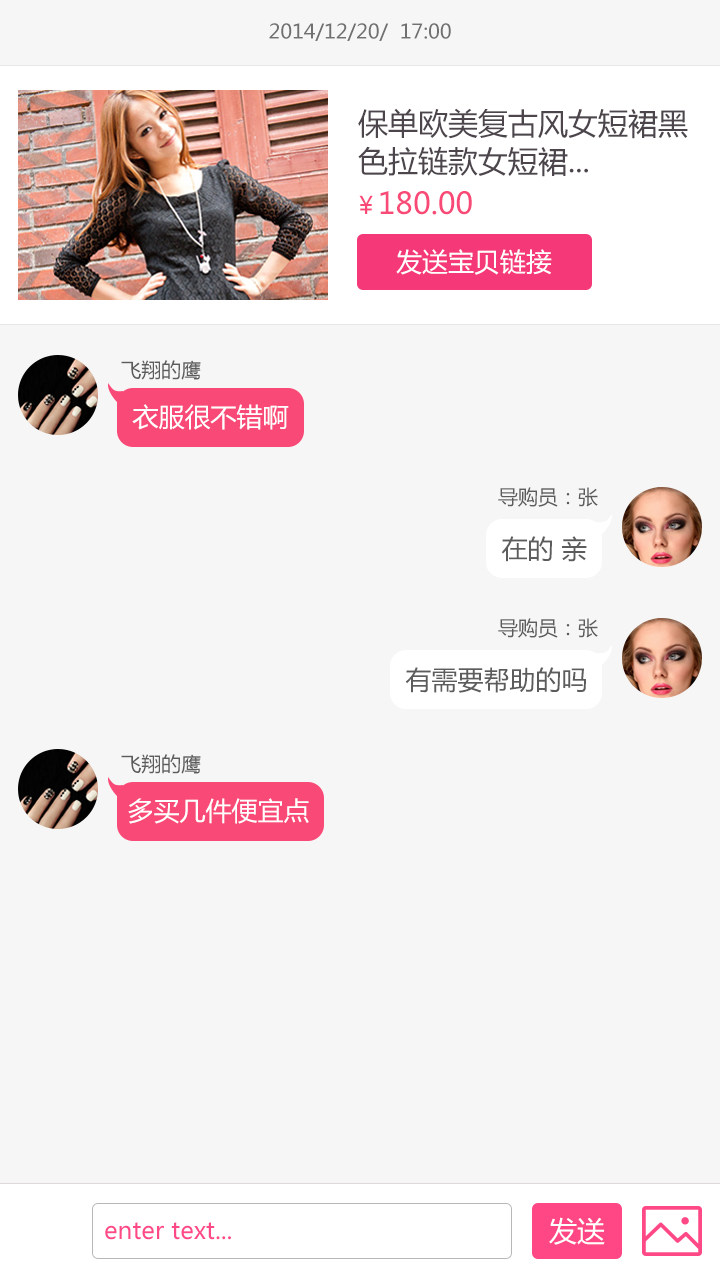
<style>
.page{position:relative;width:720px;height:1280px;background:#f7f6f6}
.page>*{position:absolute;margin:0}
.t1{font:20px "MicrosoftYaHei";color:#707070}
.t2{font:30px/38px "MicrosoftYaHei";color:#4c454c}
.t3{font:30px "MicrosoftYaHei";color:#f94977}
.t4{font:24px "MicrosoftYaHei";color:#f94977}
.t5{font:26px "MicrosoftYaHei";color:#ffffff}
.t6{font:20px "MicrosoftYaHei";color:#5c5c5c}
.t7{font:26px "MicrosoftYaHei";color:#5c5c5c}
.t8{font:28px "MicrosoftYaHei";color:#fffffe}
.t9{font:24px "MicrosoftYaHei";color:#ff4987}
</style>
<div class="page">
<p class="t1" style="left:269px;top:23px;width:182px;height:18px">2014/12/20/  17:00</p>
<p class="t2" style="left:358px;top:108px;width:330px;height:69px">保单欧美复古风女短裙黑<br>色拉链款女短裙...</p>
<p class="t3" style="left:359px;top:191px;width:113px;height:24px"><span class="t4">￥</span>180.00</p>
<p class="t5" style="left:396px;top:249px;width:156px;height:26px">发送宝贝链接</p>
<p class="t6" style="left:121px;top:360px;width:80px;height:20px">飞翔的鹰</p>
<p class="t5" style="left:132px;top:404px;width:157px;height:26px">衣服很不错啊</p>
<p class="t6" style="left:498px;top:487px;width:100px;height:20px">导购员：张</p>
<p class="t7" style="left:501px;top:536px;width:86px;height:26px">在的 亲</p>
<p class="t6" style="left:498px;top:618px;width:100px;height:20px">导购员：张</p>
<p class="t7" style="left:405px;top:667px;width:181px;height:26px">有需要帮助的吗</p>
<p class="t6" style="left:121px;top:754px;width:80px;height:20px">飞翔的鹰</p>
<p class="t5" style="left:128px;top:798px;width:181px;height:26px">多买几件便宜点</p>
<p class="t8" style="left:549px;top:1217px;width:56px;height:28px">发送</p>
<p class="t9" style="left:105px;top:1222px;width:126px;height:18px">enter text...</p>
</div>
